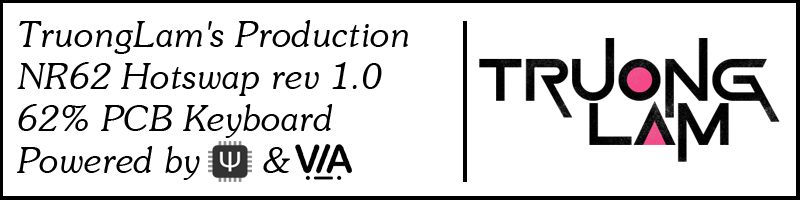
<style>
.page{position:relative;width:800px;height:200px;background:#ffffff}
.page>*{position:absolute;margin:0}
.t1{font:35px "UVNSaigonItalic";color:#000000}
</style>
<div class="page">
<p class="t1" style="left:17px;top:20px;width:391px;height:160px">TruongLam's Production<br>NR62 Hotswap rev 1.0<br>62% PCB Keyboard<br>Powered by      &amp;</p>
</div>
